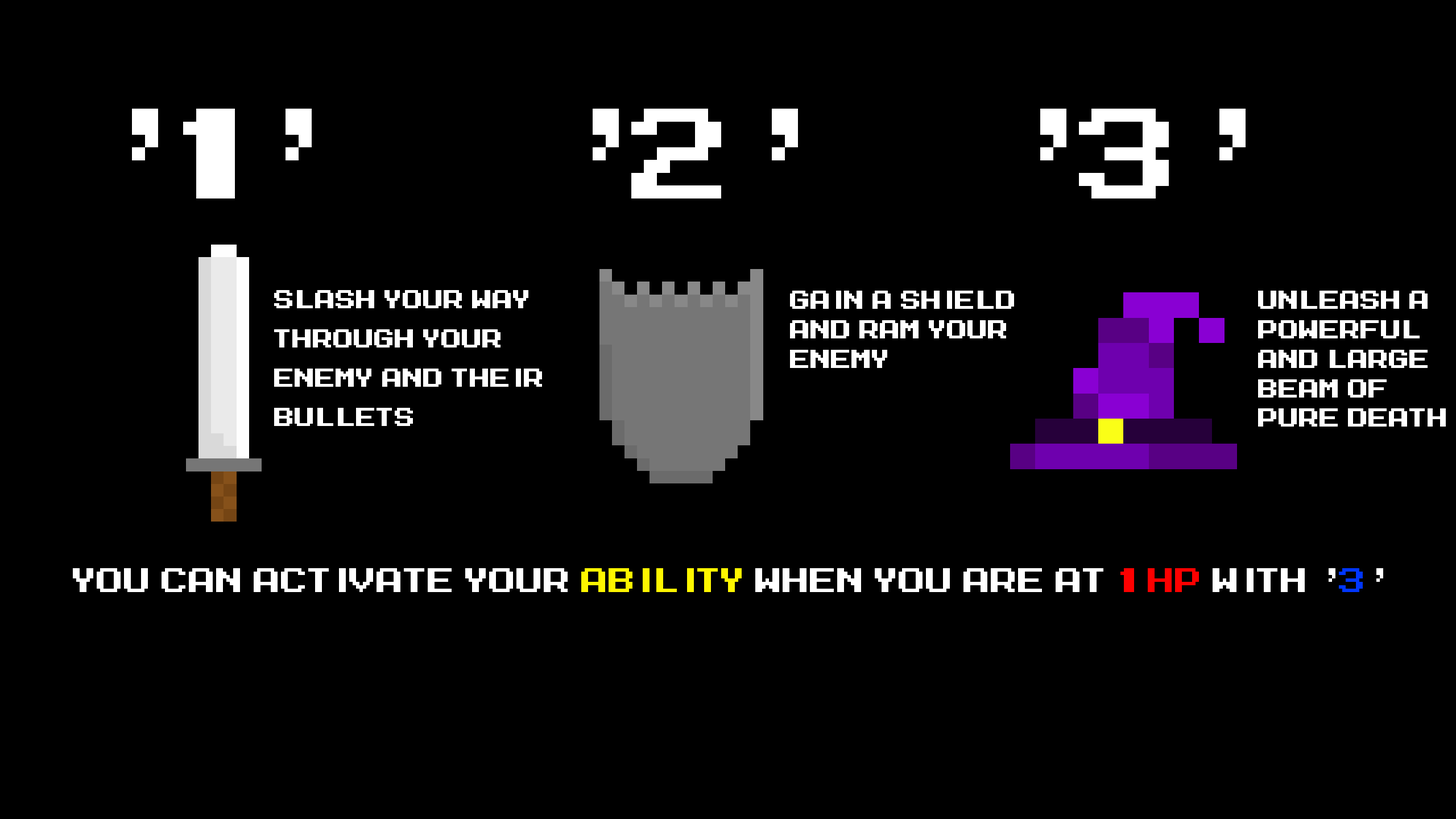
<style>
.page{position:relative;width:1456px;height:819px;background:#000000}
.page>*{position:absolute;margin:0}
.t1{font:102.4px "MegaMan-2";color:#ffffff}
.t2{font:20.5px/9.8px "MegaMan-2";color:#ffffff}
.t3{font:27.3px "MegaMan-2";color:#ffffff}
.t4{font:27.3px "MegaMan-2";color:#fff600}
.t5{font:27.3px "MegaMan-2";color:#fe0000}
.t6{font:27.3px "MegaMan-2";color:#0036ff}
</style>
<div class="page">
<p class="t1" style="left:132px;top:109px;width:1114px;height:89px">“1”      “2”     “3”</p>
<p class="t2" style="left:274px;top:290px;width:268px;height:136px">slash your way<br><br><br><br>through your <br><br><br><br>enemy and their <br><br><br><br>bullets</p>
<p class="t2" style="left:790px;top:291px;width:224px;height:77px">Gain a shield <br><br><br>and ram your <br><br><br>enemy</p>
<p class="t2" style="left:1258px;top:291px;width:188px;height:136px">unleash a<br><br><br>powerful <br><br><br>and large <br><br><br>beam of <br><br><br>pure death</p>
<p class="t3" style="left:73px;top:568px;width:1310px;height:24px">You can activate your <span class="t4">ability</span> when you are at <span class="t5">1 hp</span> with “<span class="t6">3</span>”</p>
</div>
